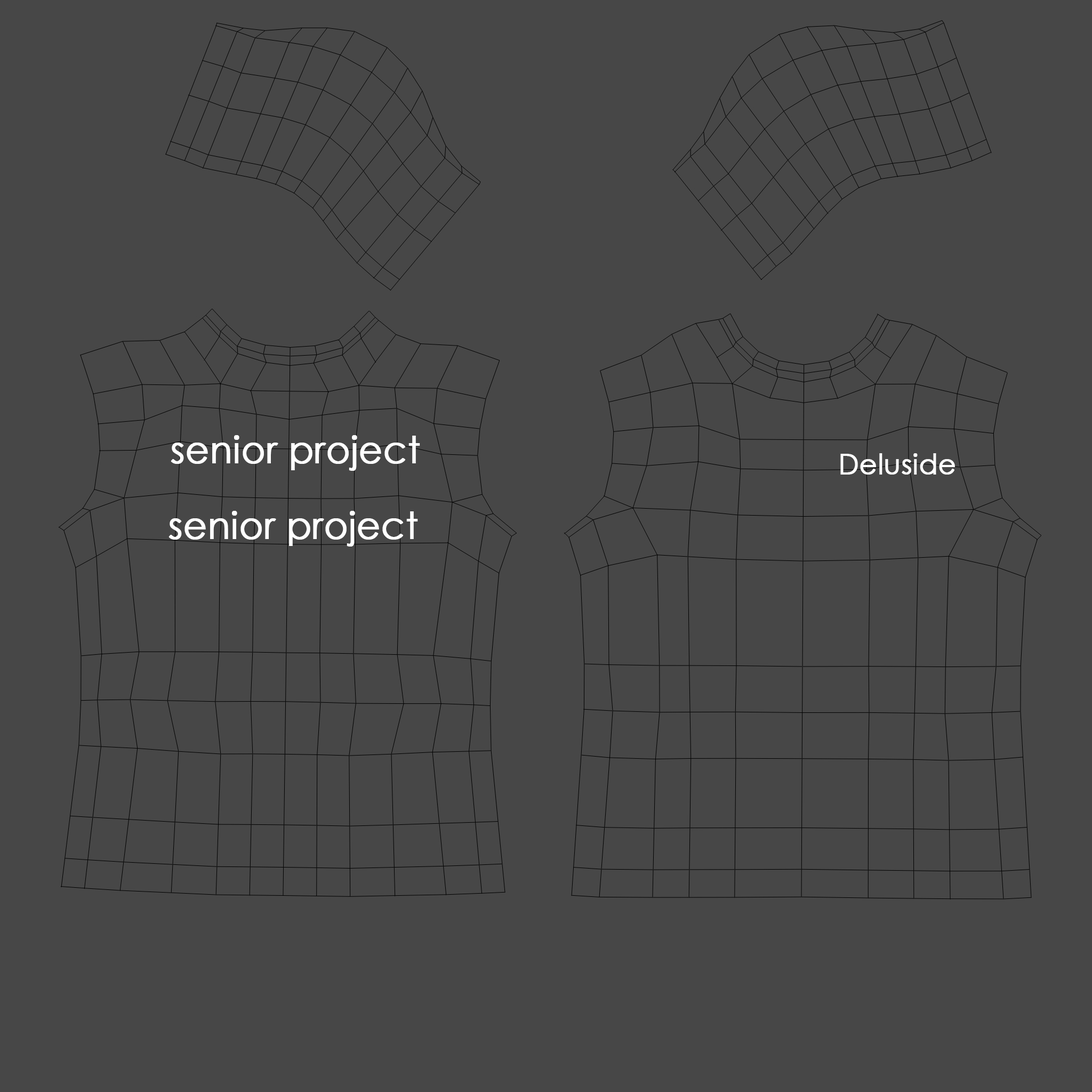
<style>
.page{position:relative;width:1092px;height:1092px;background:#474747}
.page>*{position:absolute;margin:0}
.t1{font:37px "CenturyGothic";color:#ffffff;font-weight:bold}
.t2{font:28px "CenturyGothic";color:#ffffff;font-weight:bold}
</style>
<div class="page">
<p class="t1" style="left:171px;top:435px;width:249px;height:36px">senior project</p>
<p class="t2" style="left:840px;top:453px;width:115px;height:22px">Deluside</p>
<p class="t2" style="left:840px;top:453px;width:115px;height:22px">Deluside</p>
<p class="t1" style="left:168px;top:511px;width:250px;height:36px">senior project</p>
</div>
